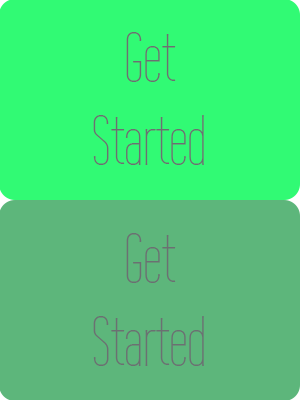
<style>
.page{position:relative;width:300px;height:400px;background:#31fa74}
.page>*{position:absolute;margin:0}
.t1{font:69px "WireOne";color:#6b7072}
</style>
<div class="page">
<p class="t1" style="left:93px;top:32px;width:111px;height:133px;text-align:center">Get <br>Started</p>
<p class="t1" style="left:93px;top:233px;width:111px;height:133px;text-align:center">Get <br>Started</p>
</div>
